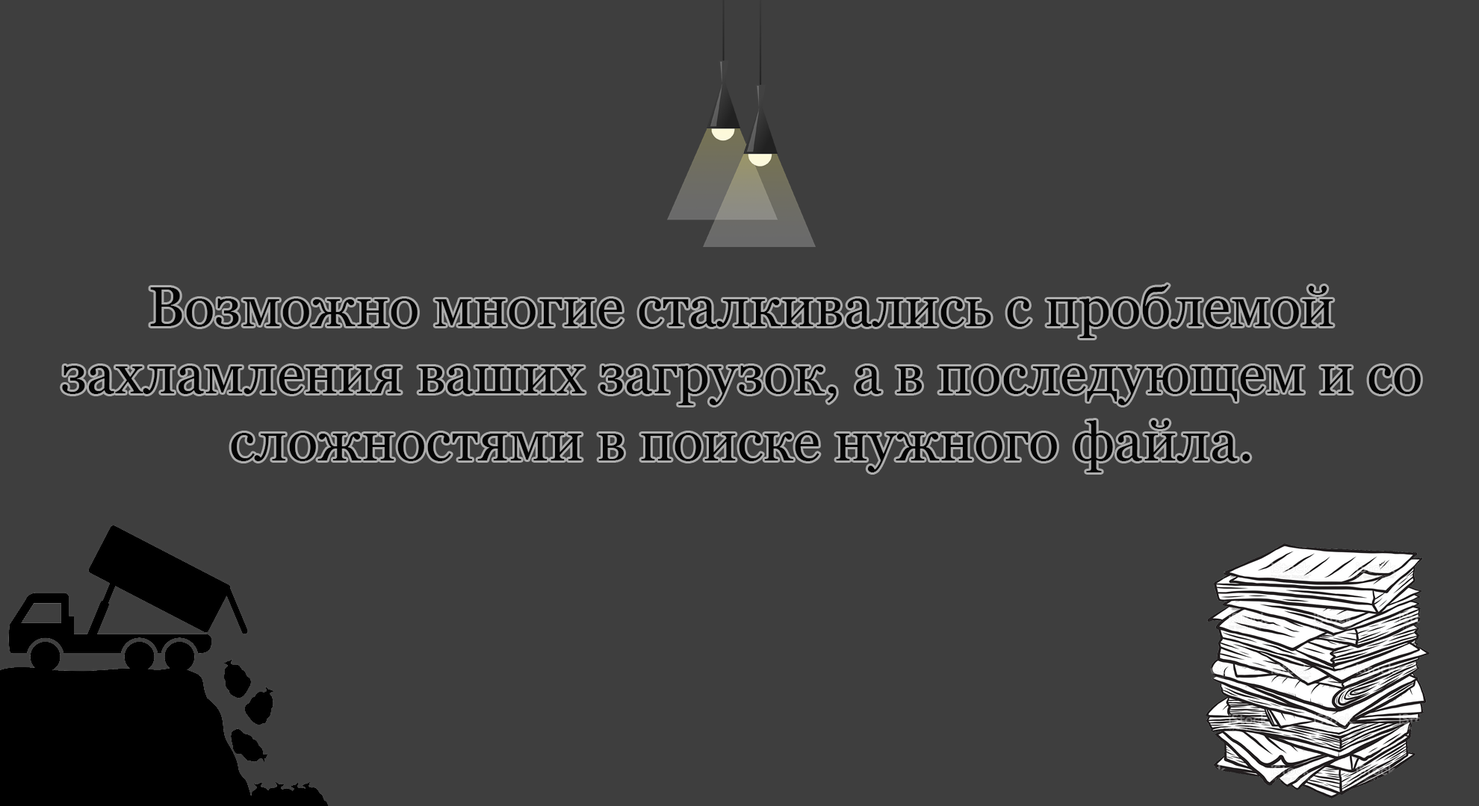
<style>
.page{position:relative;width:1479px;height:806px;background:#3e3e3e}
.page>*{position:absolute;margin:0}
.t1{font:56px "Georgia";color:#050505}
</style>
<div class="page">
<p class="t1" style="left:62px;top:285px;width:1358px;height:188px;text-align:center">Возможно многие сталкивались с проблемой захламления ваших загрузок, а в последующем и со сложностями в поиске нужного файла.</p>
</div>
